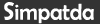
<style>
.page{position:relative;width:100px;height:24px;background:#333333}
.page>*{position:absolute;margin:0}
.t1{font:23px "BerlinSansFB-Reg";color:#ffffff;scale:0.96 1}
.t2{font:25.5px "BerlinSansFB-Reg";color:#ffffff;scale:0.96 1}
</style>
<div class="page">
<p class="t1" style="left:4px;top:2px;width:90px;height:22px"><span class="t2">S</span>impatda</p>
</div>
